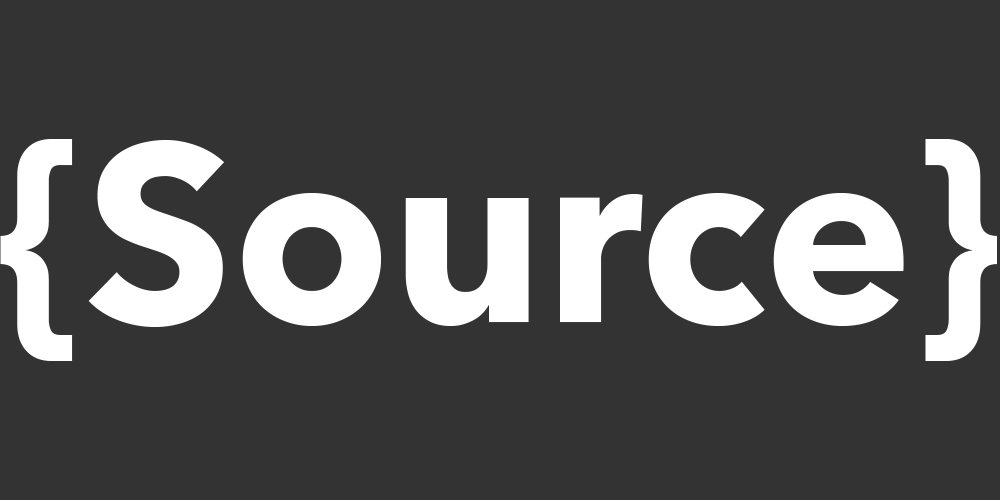
<style>
.page{position:relative;width:1000px;height:500px;background:#333333}
.page>*{position:absolute;margin:0}
.t1{font:250px "AvenirNext-Bold";color:#ffffff}
</style>
<div class="page">
<p class="t1" style="left:0px;top:139px;width:997px;height:222px">{Source}</p>
</div>
